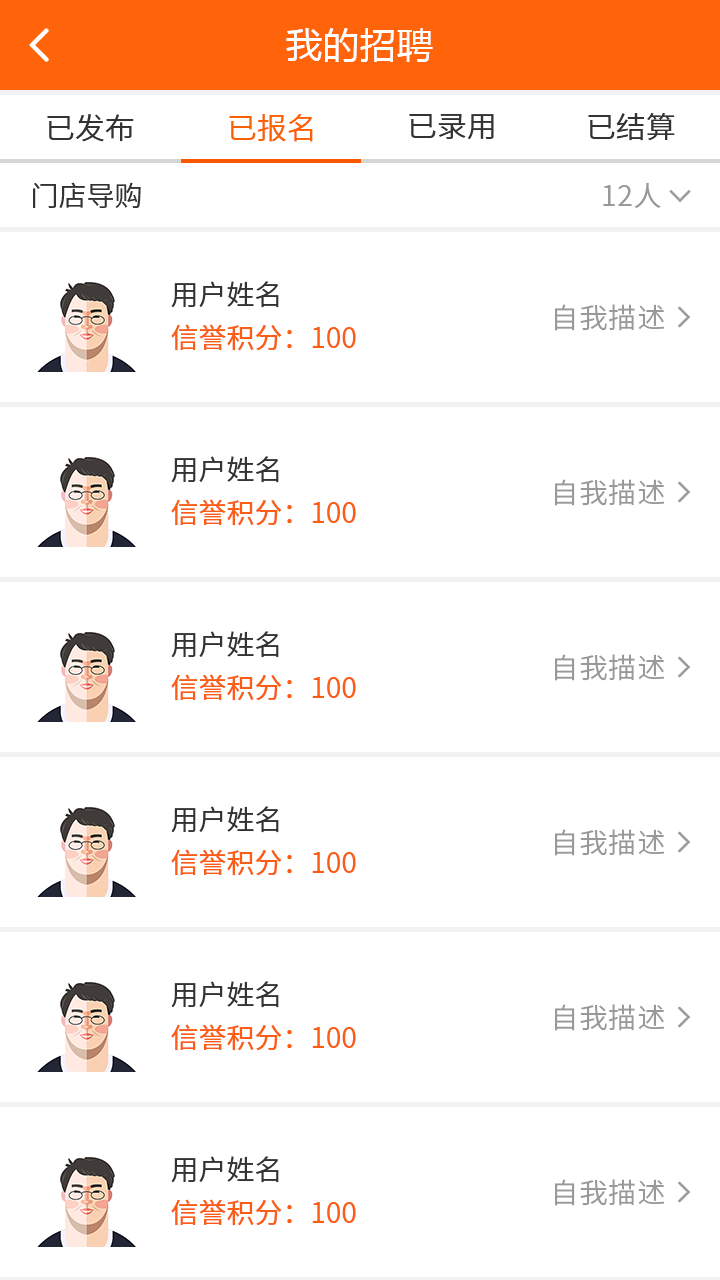
<style>
.page{position:relative;width:720px;height:1280px;background:#ffffff}
.page>*{position:absolute;margin:0}
.t1{font:36px "MicrosoftYaHei";letter-spacing:0.03em;color:#ffffff}
.t2{font:30px "NotoSansCJKsc-DemiLight";color:#333333;font-variant:small-caps}
.t3{font:30px "NotoSansCJKsc-DemiLight";color:#fb6100;font-variant:small-caps}
.t4{font:28px "NotoSansCJKsc-DemiLight";color:#333333;font-variant:small-caps}
.t5{font:28px "NotoSansCJKsc-DemiLight";letter-spacing:0.03em;color:#999999;font-variant:small-caps}
.t6{font:27.9px "NotoSansCJKsc-DemiLight";letter-spacing:0.03em;color:#999999;font-variant:small-caps}
.t7{font:28px "NotoSansCJKsc-Regular";color:#fb5d15;font-variant:small-caps}
</style>
<div class="page">
<p class="t1" style="left:286px;top:28px;width:147px;height:34px">我的招聘</p>
<p class="t2" style="left:409px;top:113px;width:85px;height:27px">已录用</p>
<p class="t2" style="left:588px;top:113px;width:87px;height:28px">已结算</p>
<p class="t2" style="left:47px;top:114px;width:87px;height:28px">已发布</p>
<p class="t3" style="left:229px;top:114px;width:84px;height:28px">已报名</p>
<p class="t4" style="left:33px;top:182px;width:108px;height:26px">门店导购</p>
<p class="t5" style="left:603px;top:182px;width:58px;height:26px">12人</p>
<p class="t4" style="left:171px;top:281px;width:108px;height:27px">用户姓名</p>
<p class="t6" style="left:555px;top:304px;width:110px;height:27px">自我描述</p>
<p class="t7" style="left:171px;top:324px;width:185px;height:27px">信誉积分：100</p>
<p class="t4" style="left:171px;top:456px;width:108px;height:27px">用户姓名</p>
<p class="t6" style="left:555px;top:479px;width:110px;height:27px">自我描述</p>
<p class="t7" style="left:171px;top:499px;width:185px;height:27px">信誉积分：100</p>
<p class="t4" style="left:171px;top:631px;width:108px;height:27px">用户姓名</p>
<p class="t6" style="left:555px;top:654px;width:110px;height:27px">自我描述</p>
<p class="t7" style="left:171px;top:674px;width:185px;height:27px">信誉积分：100</p>
<p class="t4" style="left:171px;top:806px;width:108px;height:27px">用户姓名</p>
<p class="t6" style="left:555px;top:829px;width:110px;height:27px">自我描述</p>
<p class="t7" style="left:171px;top:849px;width:185px;height:27px">信誉积分：100</p>
<p class="t4" style="left:171px;top:981px;width:108px;height:27px">用户姓名</p>
<p class="t6" style="left:555px;top:1004px;width:110px;height:27px">自我描述</p>
<p class="t7" style="left:171px;top:1024px;width:185px;height:27px">信誉积分：100</p>
<p class="t4" style="left:171px;top:1156px;width:108px;height:27px">用户姓名</p>
<p class="t6" style="left:555px;top:1179px;width:110px;height:27px">自我描述</p>
<p class="t7" style="left:171px;top:1199px;width:185px;height:27px">信誉积分：100</p>
</div>
